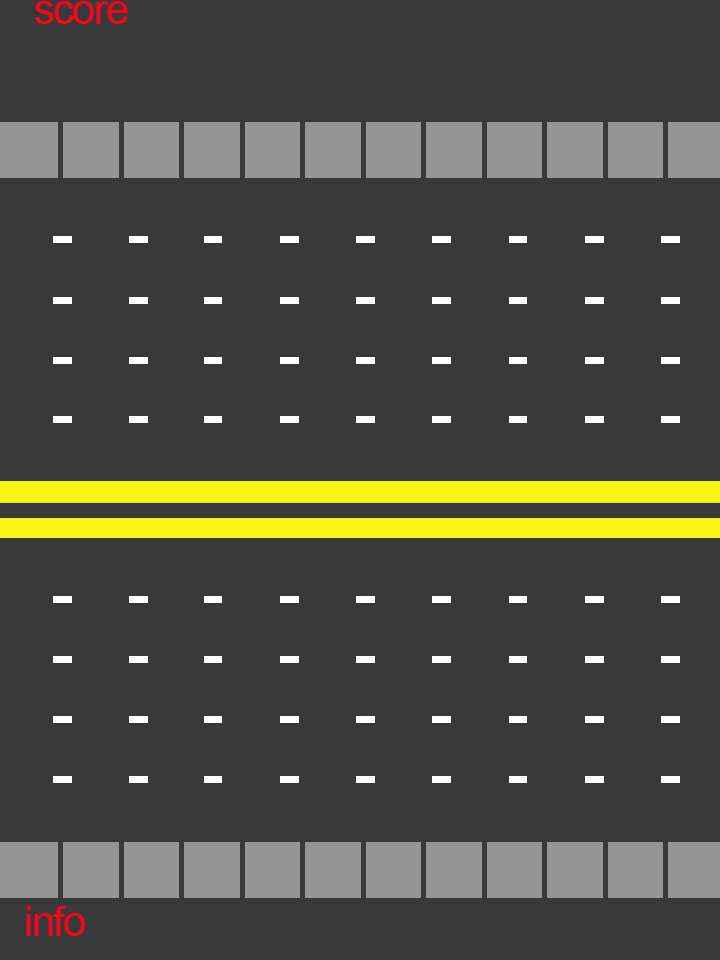
<style>
.page{position:relative;width:720px;height:960px;background:#3a3939}
.page>*{position:absolute;margin:0}
.t1{font:41.7px "ArialMT";letter-spacing:-0.04em;color:#fb041b}
</style>
<div class="page">
<p class="t1" style="left:35px;top:1px;width:93px;height:23px">score</p>
<p class="t1" style="left:26px;top:906px;width:59px;height:30px">info</p>
</div>
